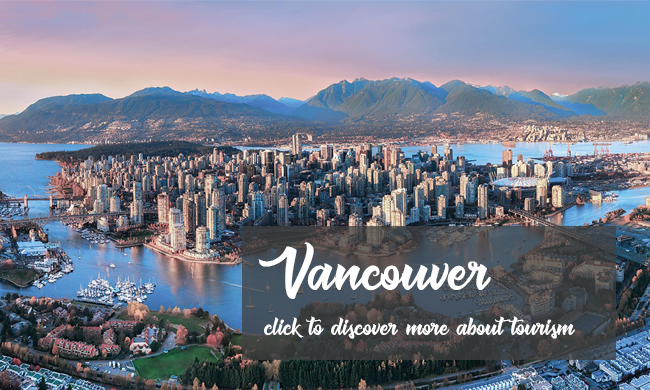
<style>
.page{position:relative;width:650px;height:390px}
.page>*{position:absolute;margin:0}
.t1{font:70px "Muskaters";color:#ffffff}
.t2{font:30px "Muskaters";color:#ffffff}
</style>
<div class="page">
<p class="t1" style="left:258px;top:242px;width:233px;height:57px">Vancouver</p>
<p class="t2" style="left:264px;top:316px;width:311px;height:23px">click to discover more about tourism</p>
</div>
